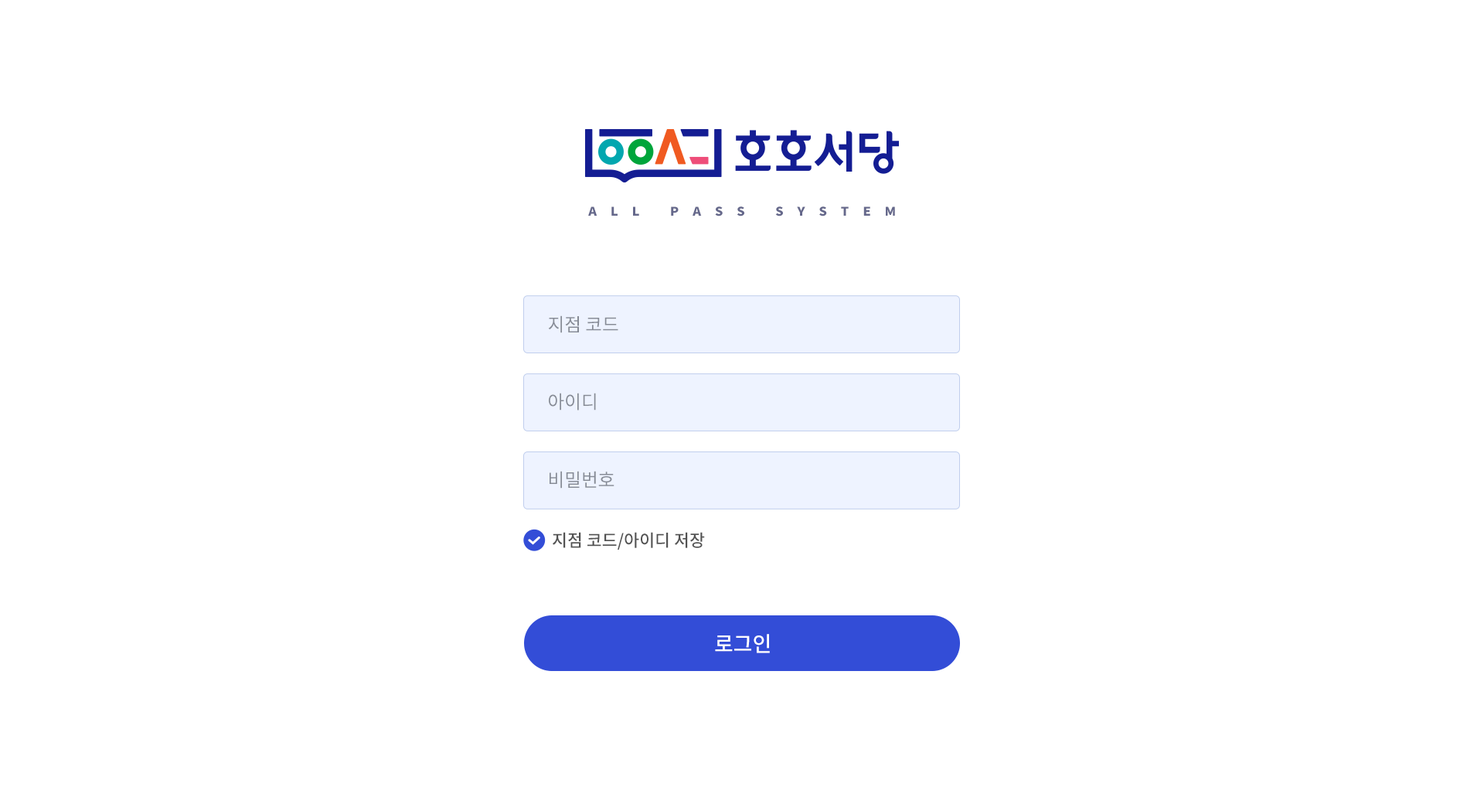
<style>
.page{position:relative;width:1484px;height:804px;background:#ffffff}
.page>*{position:absolute;margin:0}
.t1{font:11.9px "NotoSansCJKkr-Black";letter-spacing:1.06em;color:#65688b;text-transform:uppercase;scale:1.08 1}
.t2{font:18.5px "NotoSansCJKkr-Regular";color:#868b95}
.t3{font:17px "NotoSansCJKkr-Medium";color:#525252}
.t4{font:21.2px "NotoSansCJKkr-Medium";color:#ffffff}
</style>
<div class="page">
<p class="t1" style="left:588px;top:206px;width:307px;height:10px">All Pass system</p>
<p class="t2" style="left:548px;top:315px;width:70px;height:18px">지점 코드</p>
<p class="t2" style="left:549px;top:393px;width:47px;height:17px">아이디</p>
<p class="t2" style="left:549px;top:471px;width:65px;height:17px">비밀번호</p>
<p class="t3" style="left:553px;top:532px;width:152px;height:17px">지점 코드/아이디 저장</p>
<p class="t4" style="left:715px;top:634px;width:55px;height:19px">로그인</p>
</div>
